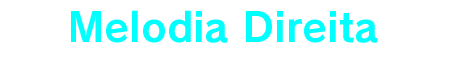
<style>
.page{position:relative;width:450px;height:60px;background:#ffffff}
.page>*{position:absolute;margin:0}
.t1{font:40px "RodinPro-B";color:#00ffff}
</style>
<div class="page">
<p class="t1" style="left:71px;top:10px;width:307px;height:33px">Melodia Direita</p>
</div>
